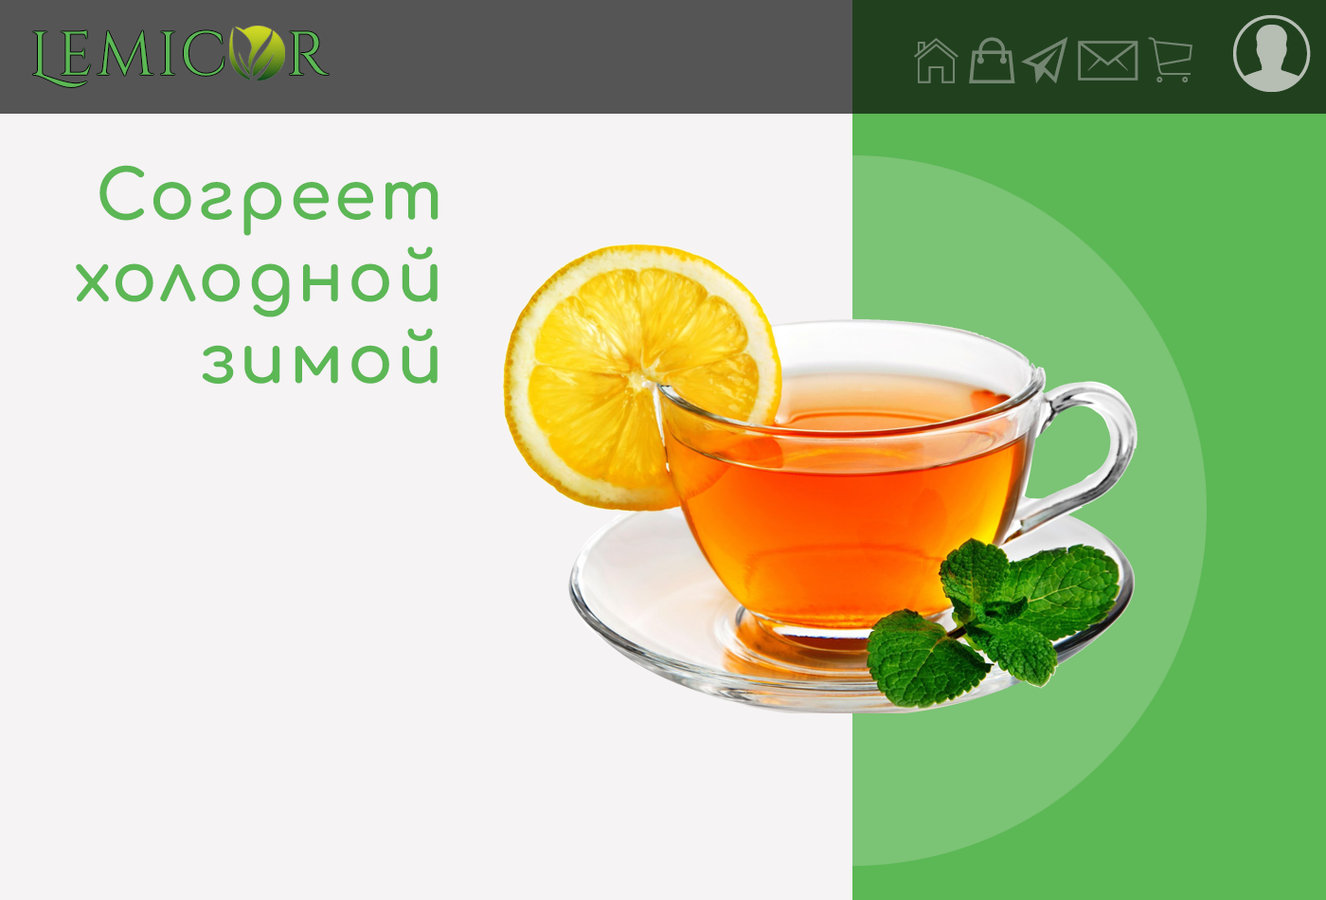
<style>
.page{position:relative;width:1326px;height:900px;background:#f5f3f4}
.page>*{position:absolute;margin:0}
.t1{font:61.4px "CinzelDecorative-Regular";letter-spacing:0.05em;color:#5cb755}
.t2{font:68.2px "Comfortaa-Bold";letter-spacing:0.05em;color:#5cb755}
</style>
<div class="page">
<p class="t1" style="left:33px;top:30px;width:296px;height:57px">Lemic   r</p>
<p class="t2" style="left:76px;top:165px;width:362px;height:218px;text-align:right">Согреет<br>холодной<br>зимой</p>
</div>
